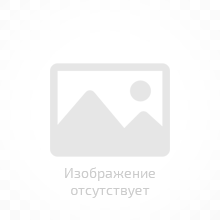
<style>
.page{position:relative;width:220px;height:220px;background:#ffffff}
.page>*{position:absolute;margin:0}
.t1{font:14px "Exo2-Regular";color:#cccccc}
</style>
<div class="page">
<p class="t1" style="left:65px;top:167px;width:90px;height:31px;text-align:center">Изображение<br>отсутствует</p>
</div>
